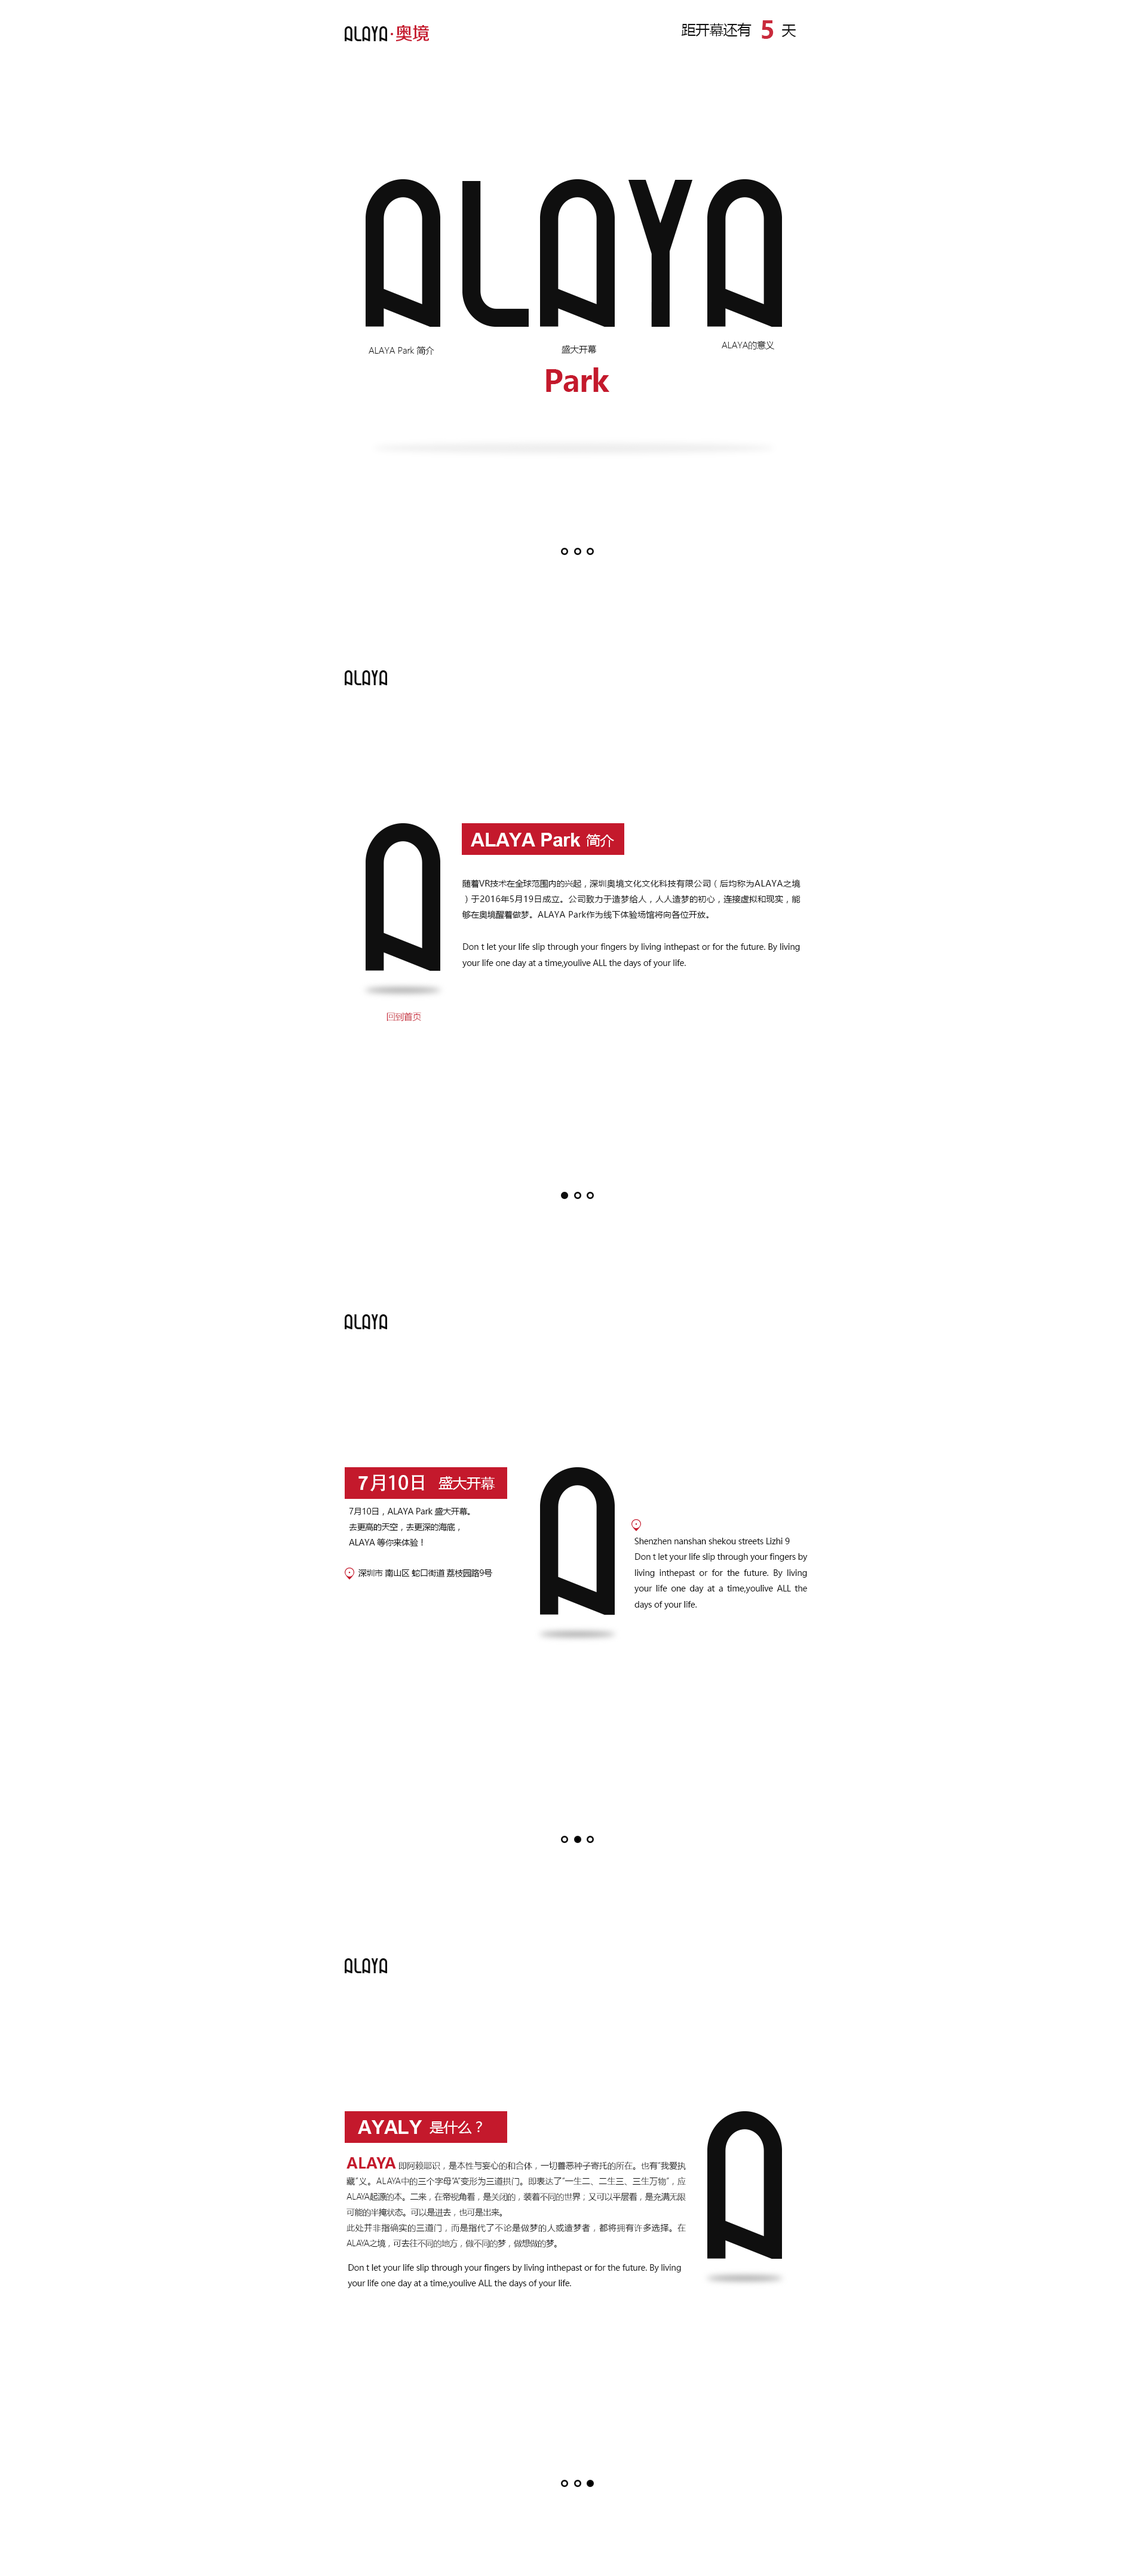
<style>
.page{position:relative;width:1147px;height:2576px;background:#ffffff}
.page>*{position:absolute;margin:0}
.t1{font:14.3px "MicrosoftYaHei";letter-spacing:-0.025em;color:#0f0f0f}
.t2{font:23.9px "MicrosoftYaHei-Bold";letter-spacing:-0.025em;color:#c92a3c}
.t3{font:8.9px "MicrosoftYaHeiLight";letter-spacing:-0.025em;color:#0f0f0f}
.t4{font:30px "MicrosoftYaHei-Bold";letter-spacing:-0.025em;color:#c4192c}
.t5{font:19.4px "Arial-BoldMT";letter-spacing:-0.025em;color:#ffffff}
.t6{font:14.3px "MicrosoftYaHei";letter-spacing:-0.025em;color:#ffffff}
.t7{font:8.4px/15.5px "MicrosoftYaHei";letter-spacing:0.02em;color:#0f0f0f}
.t8{font:8.4px/15.5px "MicrosoftYaHei";letter-spacing:-0.025em;color:#0f0f0f}
.t9{font:8.4px/15.5px "MicrosoftYaHei";color:#0f0f0f}
.t10{font:8.4px/15.9px "MicrosoftYaHei";letter-spacing:-0.025em;color:#0f0f0f}
.t11{font:8.9px "MicrosoftYaHeiLight";letter-spacing:-0.025em;color:#c4192c}
.t12{font:19.4px "AdobeHeitiStd-Regular";letter-spacing:-0.025em;color:#ffffff}
.t13{font:8.4px "MicrosoftYaHei";letter-spacing:-0.025em;color:#0f0f0f}
.t14{font:8.4px/15.5px "MicrosoftYaHeiLight";letter-spacing:-0.04em}
.t15{font:14.9px/15.5px "MicrosoftYaHei-Bold"}
.t16{font:8.4px/15.5px "MicrosoftYaHeiLight"}
.t17{font:8.4px/15.5px "MicrosoftYaHeiLight";letter-spacing:0.02em}
.t18{font:8.4px/15.5px "MicrosoftYaHeiLight";letter-spacing:-0.02em}
</style>
<div class="page">
<p class="t1" style="left:681px;top:23px;width:71px;height:13px">距开幕还有</p>
<p class="t2" style="left:762px;top:20px;width:12px;height:19px">5</p>
<p class="t1" style="left:781px;top:24px;width:15px;height:13px">天</p>
<p class="t3" style="left:722px;top:341px;width:52px;height:8px">ALAYA的意义</p>
<p class="t3" style="left:369px;top:346px;width:65px;height:9px">ALAYA Park 简介</p>
<p class="t3" style="left:562px;top:345px;width:34px;height:9px">盛大开幕</p>
<p class="t4" style="left:546px;top:367px;width:63px;height:25px">Park</p>
<p class="t5" style="left:471px;top:833px;width:110px;height:14px">ALAYA Park</p>
<p class="t6" style="left:586px;top:834px;width:28px;height:13px">简介</p>
<p class="t7" style="left:462px;top:879px;width:339px;height:40px;text-align:justify"><span class="t8">随着VR技术在全球范围内的兴起，</span>深圳奥境文化文化科技有限公司（后均称为ALAYA之境）于2016年5月19日成立。公司致力于造梦给人<span class="t9">，人人造梦的初心，连接虚拟和现实，能够在奥境醒着做梦。</span>ALAYA Park作为线下体验场馆将向各位开放。</p>
<p class="t10" style="left:462px;top:943px;width:338px;height:25px;text-align:justify">Don t let your life slip through your fingers by living inthepast or for the future. By living your life one day at a time,youlive ALL the days of your life.</p>
<p class="t11" style="left:387px;top:1012px;width:34px;height:9px">回到首页</p>
<p class="t12" style="left:358px;top:1474px;width:66px;height:18px"><span class="t5">7</span>月10日</p>
<p class="t6" style="left:438px;top:1476px;width:57px;height:14px">盛大开幕</p>
<p class="t8" style="left:349px;top:1507px;width:121px;height:40px">7月10日，ALAYA Park 盛大开幕。<br>去更高的天空，去更深的海底，<br>ALAYA 等你来体验！</p>
<p class="t13" style="left:634px;top:1538px;width:156px;height:6px">Shenzhen nanshan shekou streets Lizhi 9</p>
<p class="t10" style="left:634px;top:1553px;width:174px;height:56px;text-align:justify">Don t let your life slip through your fingers by living inthepast or for the future. By living your life one day at a time,youlive ALL the days of your life.</p>
<p class="t13" style="left:358px;top:1569px;width:135px;height:9px">深圳市 南山区 蛇口街道 荔枝园路9号</p>
<p class="t5" style="left:358px;top:2120px;width:64px;height:14px">AYALY</p>
<p class="t6" style="left:430px;top:2121px;width:52px;height:13px">是什么？</p>
<p class="t14" style="left:346px;top:2157px;width:340px;height:90px;text-align:justify"><span class="t15">ALAYA </span><span class="t16">即阿赖耶识，是本性与妄心的和合体，一切善恶种子寄托的所在。也有“我爱</span><span class="t17">执藏”义。</span><span class="t18">ALAYA中的三个字母“A”变形为三道拱门。即表达了“一生二、二生三、三生万物</span>”，应ALAYA起源的本。二来，在帝视角看，是关闭的，装着不同的世界；又可以平层看，是充满无限可能的半掩状态。可以是进去，也可是出来。<br><span class="t18">此处并非指确实的三道门，而是指代了不论是做梦的人或造梦者，都将拥有许多选</span>择。在ALAYA之境，可去往不同的地方，做不同的梦，做想做的梦。</p>
<p class="t10" style="left:348px;top:2264px;width:333px;height:24px">Don t let your life slip through your fingers by living inthepast or for the future. By living your life one day at a time,youlive ALL the days of your life.</p>
</div>
